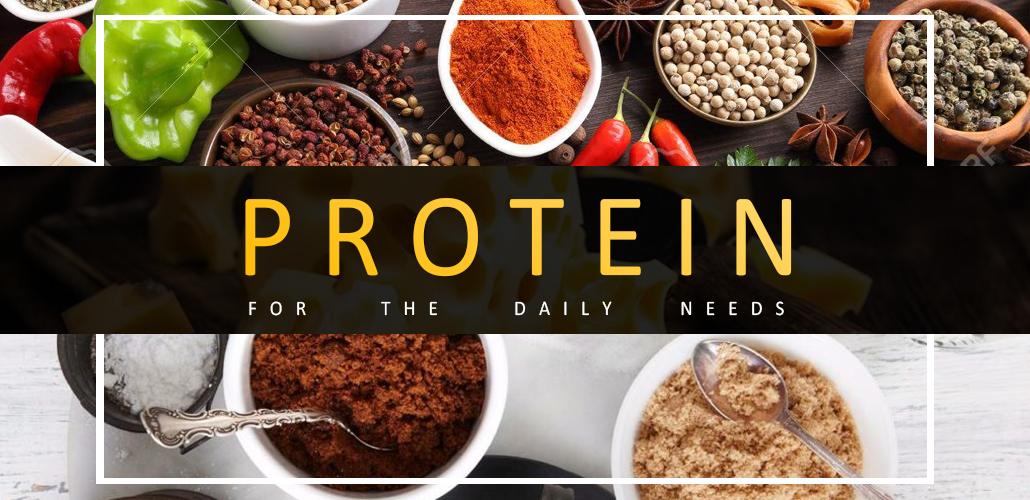
<style>
.page{position:relative;width:1030px;height:500px}
.page>*{position:absolute;margin:0}
.t1{font:119.6px "Calibri";scale:0.95 1}
.t2{font:20.8px "Calibri";color:#ffffff;scale:0.92 1}
</style>
<div class="page">
<p class="t1" style="left:245px;top:198px;width:547px;height:79px">P R O T E I N</p>
<p class="t2" style="left:249px;top:301px;width:535px;height:15px">F   O   R   T   H   E   D   A   I   L   Y   N   E   E   D   S</p>
</div>
